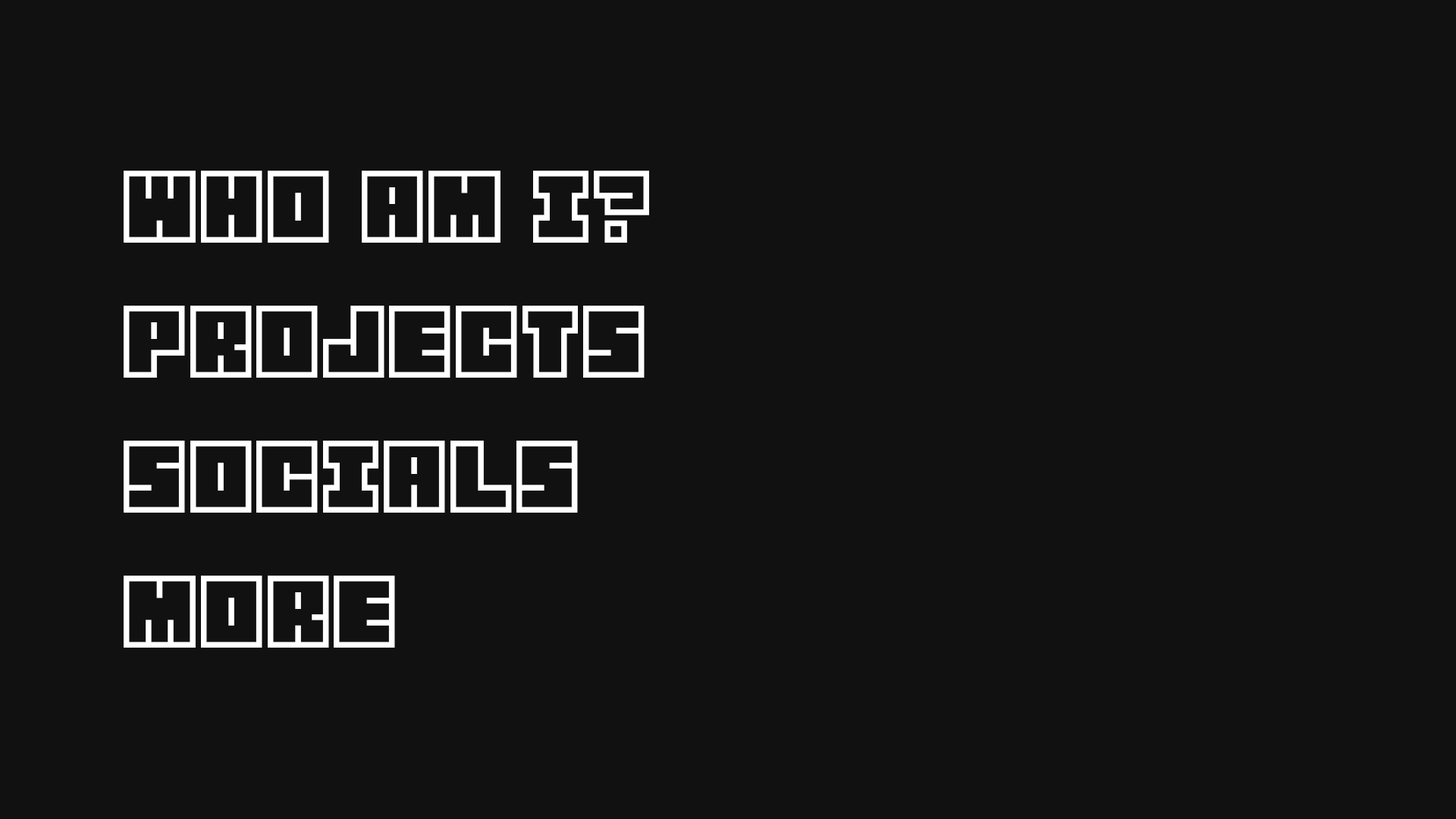
<style>
.page{position:relative;width:1456px;height:819px;background:#111111}
.page>*{position:absolute;margin:0}
.t1{font:88.5px "Blocked";color:#ffffff}
</style>
<div class="page">
<p class="t1" style="left:124px;top:171px;width:525px;height:72px">WHO AM I?</p>
<p class="t1" style="left:124px;top:306px;width:521px;height:72px">PROJECTS</p>
<p class="t1" style="left:124px;top:441px;width:454px;height:72px">SOCIALS</p>
<p class="t1" style="left:124px;top:576px;width:271px;height:72px">MORE</p>
</div>
